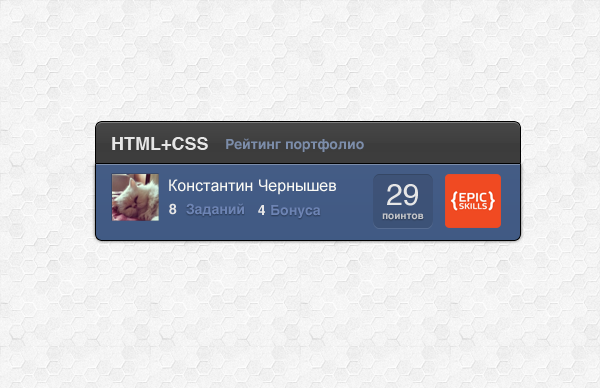
<style>
.page{position:relative;width:600px;height:388px}
.page>*{position:absolute;margin:0}
.t1{font:18px "Helvetica-Bold";color:#e6e6e6}
.t2{font:14px "Helvetica-Bold";color:#7c8daa}
.t3{font:16px "ArialMT";color:#e6e6e6}
.t4{font:30px "Helvetica";color:#e6e6e6}
.t5{font:14px "Helvetica-Bold";color:#e6e6e6}
.t6{font:14px "Helvetica-Bold";color:#6d84b4}
.t7{font:10px "Helvetica-Bold";color:#c5c6ca}
</style>
<div class="page">
<p class="t1" style="left:112px;top:137px;width:96px;height:13px">HTML+CSS</p>
<p class="t2" style="left:226px;top:138px;width:138px;height:14px">Рейтинг портфолио</p>
<p class="t3" style="left:169px;top:179px;width:167px;height:16px">Константин Чернышев</p>
<p class="t4" style="left:387px;top:184px;width:31px;height:22px">29</p>
<p class="t5" style="left:169px;top:203px;width:8px;height:12px">8</p>
<p class="t6" style="left:186px;top:203px;width:58px;height:13px">Заданий</p>
<p class="t5" style="left:258px;top:205px;width:7px;height:10px">4</p>
<p class="t6" style="left:271px;top:205px;width:50px;height:13px">Бонуса</p>
<p class="t7" style="left:382px;top:213px;width:42px;height:7px">поинтов</p>
</div>
